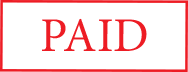
<style>
.page{position:relative;width:188px;height:72px;background:#ffffff}
.page>*{position:absolute;margin:0}
.t1{font:48.5px "MinionPro-Regular";color:#ed1c24}
</style>
<div class="page">
<p class="t1" style="left:42px;top:18px;width:105px;height:33px">PAID</p>
</div>
